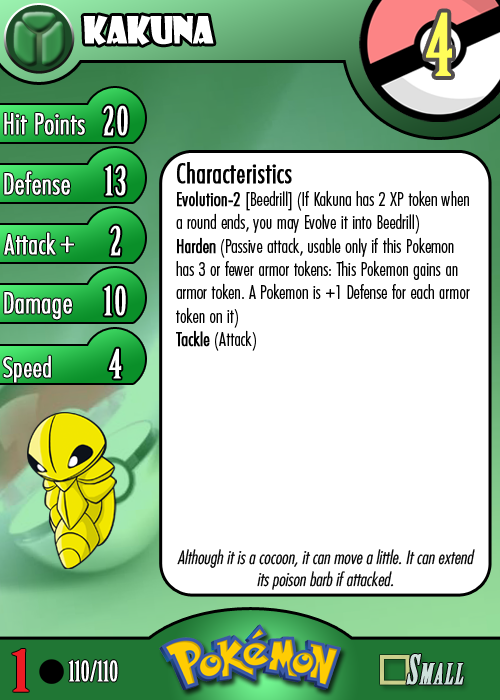
<style>
.page{position:relative;width:500px;height:700px;background:#ffffff}
.page>*{position:absolute;margin:0}
.t1{font:36.7px "ShowcardGothic-Reg";letter-spacing:-0.025em;color:#ffffff;scale:0.91 1}
.t2{font:83.3px "BirchStd";letter-spacing:0.025em;color:#fffd59;font-weight:bold}
.t3{font:27.8px "Futura-CondensedLight";color:#ffffff;font-weight:bold}
.t4{font:38.9px "BirchStd";letter-spacing:0.035em;color:#ffffff;font-weight:bold}
.t5{font:19.4px "FuturaCondensedBQ-Light";color:#010101}
.t6{font:27.8px "FuturaCondensedBQ-Light";color:#010101;font-weight:bold}
.t7{font:19.4px "FuturaCondensedBQ-Light";color:#010101;font-weight:bold}
.t8{font:27.8px "FuturaCondensedBQ-Light";color:#ffffff;font-weight:bold}
.t9{font:30.6px "Futura-CondensedLight";color:#ffffff;font-weight:bold}
.t10{font:18.1px "Futura-CondensedLight";color:#010101;font-style:italic}
.t11{font:55.6px "BirchStd";color:#ed1c24;font-weight:bold;scale:1.5 1}
.t12{font:27.8px "BirchStd";color:#ffffff;font-weight:bold}
</style>
<div class="page">
<p class="t1" style="left:83px;top:15px;width:131px;height:30px">kakuna</p>
<p class="t2" style="left:426px;top:12px;width:26px;height:64px">4</p>
<p class="t3" style="left:4px;top:113px;width:81px;height:22px">Hit Points</p>
<p class="t4" style="left:103px;top:105px;width:25px;height:31px">20</p>
<p class="t3" style="left:4px;top:171px;width:66px;height:24px">Defense</p>
<p class="t4" style="left:105px;top:165px;width:21px;height:31px">13</p>
<p class="t5" style="left:176px;top:162px;width:294px;height:189px"><span class="t6">Characteristics<br></span><span class="t7">Evolution-2 </span>[Beedrill] (If Kakuna has 2 XP token when a round ends, you may Evolve it into Beedrill)<br><span class="t7">Harden</span> (Passive attack, usable only if this Pokemon has 3 or fewer armor tokens: This Pokemon gains an armor token. A Pokemon is +1 Defense for each armor token on it)<br><span class="t7">Tackle</span> (Attack)</p>
<p class="t8" style="left:4px;top:232px;width:52px;height:23px">Attack</p>
<p class="t4" style="left:110px;top:225px;width:11px;height:31px">2</p>
<p class="t9" style="left:60px;top:236px;width:14px;height:17px">+</p>
<p class="t3" style="left:4px;top:292px;width:68px;height:28px">Damage</p>
<p class="t4" style="left:104px;top:285px;width:22px;height:31px">10</p>
<p class="t4" style="left:109px;top:348px;width:13px;height:31px">4</p>
<p class="t8" style="left:3px;top:355px;width:48px;height:28px">Speed</p>
<p class="t10" style="left:177px;top:549px;width:298px;height:41px;text-align:center">Although it is a cocoon, it can move a little. It can extend its poison barb if attacked.</p>
<p class="t11" style="left:12px;top:649px;width:17px;height:43px">1</p>
<p class="t12" style="left:68px;top:660px;width:50px;height:22px">110/110</p>
</div>
